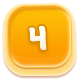
<style>
.page{position:relative;width:80px;height:80px}
.page>*{position:absolute;margin:0}
.t1{font:34.8px "Cartwheel";color:#ffffff;scale:1.03 1}
</style>
<div class="page">
<p class="t1" style="left:29px;top:26px;width:18px;height:24px">4</p>
</div>
